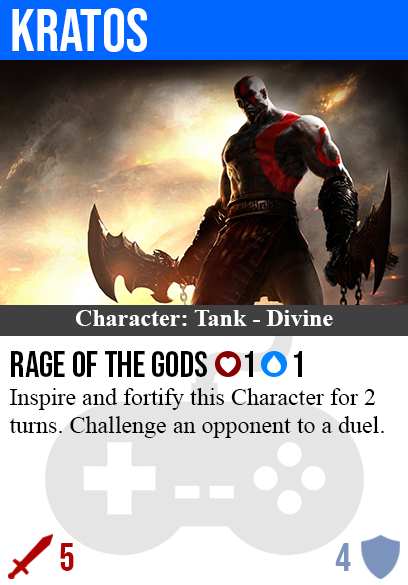
<style>
.page{position:relative;width:408px;height:585px;background:#ffffff}
.page>*{position:absolute;margin:0}
.t1{font:60px "BebasNeue-Regular";color:#ffffff}
.t2{font:24px "TimesNewRomanPS-BoldMT";color:#ffffff}
.t3{font:36px "BebasNeue-Regular";color:#000000}
.t4{font:24px "TimesNewRomanPSMT";color:#000000}
.t5{font:40px "BebasNeue-Regular";color:#af0202}
.t6{font:40px "BebasNeue-Regular";color:#7c94bd}
</style>
<div class="page">
<p class="t1" style="left:12px;top:8px;width:135px;height:44px">kratos</p>
<p class="t2" style="left:76px;top:310px;width:257px;height:16px">Character: Tank - Divine</p>
<p class="t3" style="left:11px;top:351px;width:291px;height:26px">rage of the gods      1      1</p>
<p class="t4" style="left:9px;top:388px;width:375px;height:50px">Inspire and fortify this Character for 2<br>turns. Challenge an opponent to a duel.</p>
<p class="t5" style="left:60px;top:543px;width:14px;height:28px">5</p>
<p class="t6" style="left:335px;top:543px;width:16px;height:28px">4</p>
</div>
